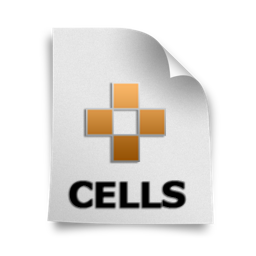
<style>
.page{position:relative;width:256px;height:256px;background:#ffffff}
.page>*{position:absolute;margin:0}
.t1{font:36px "Verdana-Bold";letter-spacing:-0.05em;color:#000000;font-weight:bold}
</style>
<div class="page">
<p class="t1" style="left:69px;top:180px;width:118px;height:28px">CELLS</p>
</div>
